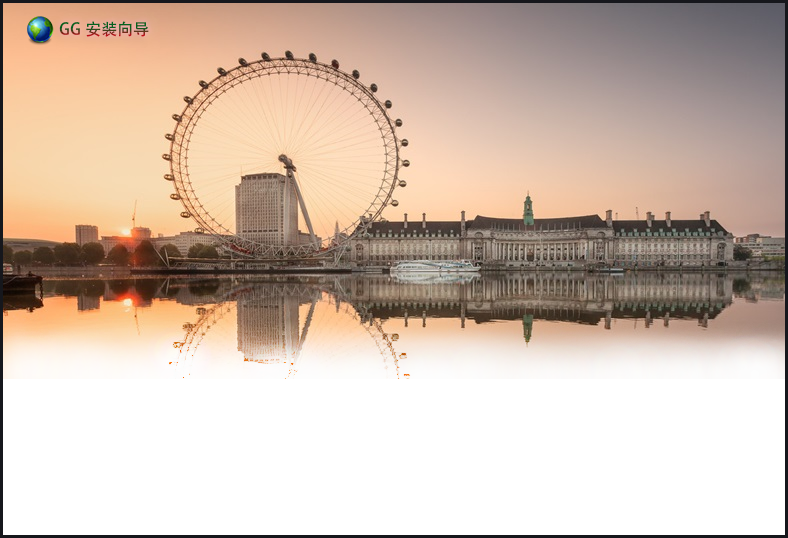
<style>
.page{position:relative;width:788px;height:538px;background:#ffffff}
.page>*{position:absolute;margin:0}
.t1{font:16px "AdobeHeitiStd-Regular"}
</style>
<div class="page">
<p class="t1" style="left:59px;top:21px;width:90px;height:16px">GG安装向导</p>
</div>
